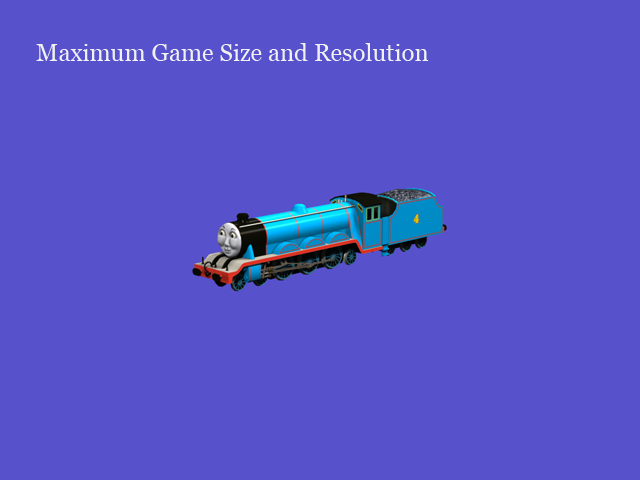
<style>
.page{position:relative;width:640px;height:480px;background:#5751cc}
.page>*{position:absolute;margin:0}
.t1{font:24px "Georgia";color:#f1f1f1}
</style>
<div class="page">
<p class="t1" style="left:36px;top:43px;width:393px;height:18px">Maximum Game Size and Resolution</p>
</div>
